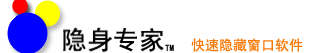
<style>
.page{position:relative;width:314px;height:53px;background:#ffffff}
.page>*{position:absolute;margin:0}
.t1{font:14px "SimHei";color:#f87804}
.t2{font:9px "SimHei";color:#000000}
</style>
<div class="page">
<p class="t1" style="left:191px;top:38px;width:112px;height:14px">快速隐藏窗口软件</p>
<p class="t2" style="left:165px;top:44px;width:9px;height:7px">TM</p>
</div>
